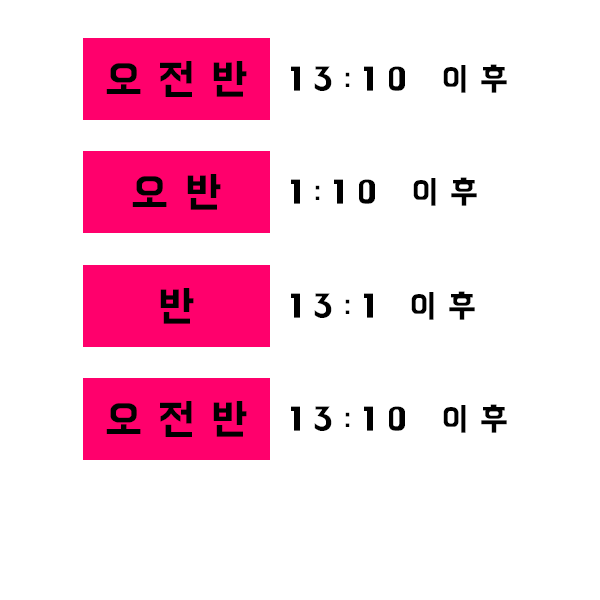
<style>
.page{position:relative;width:600px;height:600px;background:#ffffff}
.page>*{position:absolute;margin:0}
.t1{font:44px "BMHANNAPro";letter-spacing:0.37em;color:#000000}
.t2{font:33px "BMHANNAPro";letter-spacing:0.37em;color:#000000}
</style>
<div class="page">
<p class="t1" style="left:106px;top:61px;width:141px;height:36px">오전반</p>
<p class="t2" style="left:291px;top:64px;width:216px;height:29px">13:10 이후</p>
<p class="t1" style="left:132px;top:174px;width:89px;height:36px">오반</p>
<p class="t2" style="left:291px;top:177px;width:186px;height:29px">1:10 이후</p>
<p class="t1" style="left:160px;top:288px;width:34px;height:36px">반</p>
<p class="t2" style="left:291px;top:291px;width:184px;height:29px">13:1 이후</p>
<p class="t1" style="left:106px;top:401px;width:141px;height:36px">오전반</p>
<p class="t2" style="left:291px;top:404px;width:216px;height:29px">13:10 이후</p>
</div>
